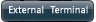
<style>
.page{position:relative;width:96px;height:22px}
.page>*{position:absolute;margin:0}
.t1{font:9px "MicrosoftYaHei";color:#fefafa;font-weight:bold}
</style>
<div class="page">
<p class="t1" style="left:9px;top:5px;width:79px;height:9px">External  Terminal</p>
</div>
